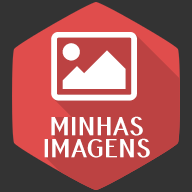
<style>
.page{position:relative;width:192px;height:192px;background:#333333}
.page>*{position:absolute;margin:0}
.t1{font:26px/22px "PfennigBold";color:#ffffff}
</style>
<div class="page">
<p class="t1" style="left:44px;top:116px;width:106px;height:42px;text-align:center">MINHAS<br>IMAGENS</p>
</div>
